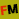
<style>
.page{position:relative;width:19px;height:19px;background:#b2b00c}
.page>*{position:absolute;margin:0}
.t1{font:12px "KIAB";color:#df2d04;font-weight:bold}
.t2{font:12px "KIAB";color:#000000;font-weight:bold}
</style>
<div class="page">
<p class="t1" style="left:0px;top:3px;width:19px;height:13px;rotate:-7deg">F<span class="t2">M</span></p>
</div>
